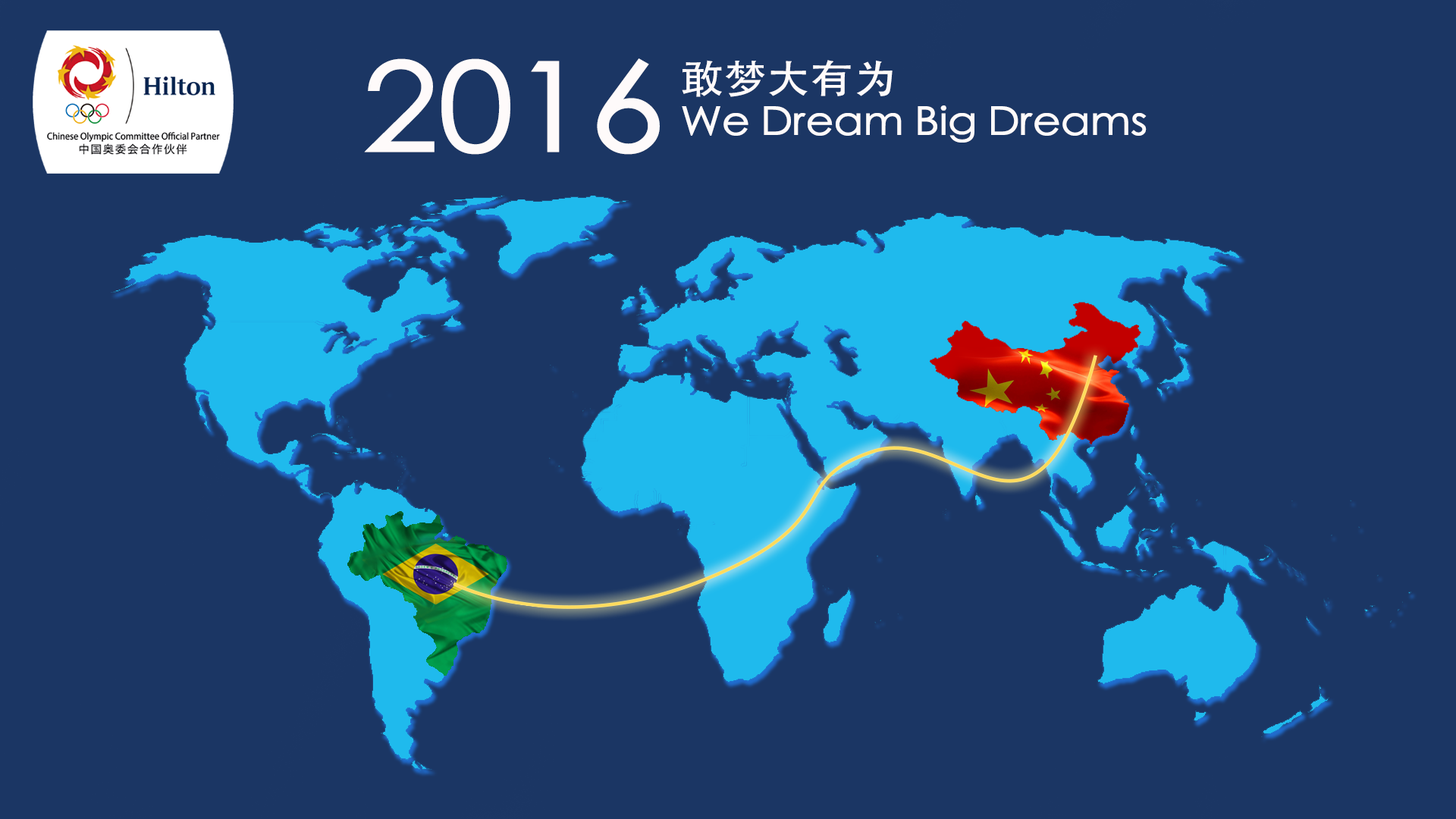
<style>
.page{position:relative;width:1456px;height:819px;background:#1b3664}
.page>*{position:absolute;margin:0}
.t1{font:123.9px "STHeitiSC-Medium";color:#fefafa;scale:1.1 1}
.t2{font:39.3px/45px "STHeitiSC-Medium";color:#fefafa;scale:1.1 1}
</style>
<div class="page">
<p class="t1" style="left:364px;top:58px;width:296px;height:97px">2016</p>
<p class="t2" style="left:682px;top:60px;width:465px;height:83px">敢梦大有为<br>We Dream Big Dreams</p>
</div>
